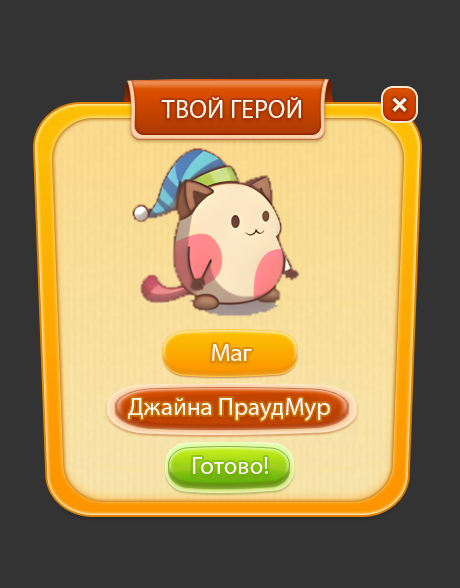
<style>
.page{position:relative;width:460px;height:588px;background:#333333}
.page>*{position:absolute;margin:0}
.t1{font:26px "MyriadPro-Regular";color:#ffffff}
.t2{font:25px "MyriadPro-Regular";color:#fdf6e8}
.t3{font:25px "MyriadPro-Regular";color:#ffffff}
</style>
<div class="page">
<p class="t1" style="left:161px;top:97px;width:140px;height:21px">ТВОЙ ГЕРОЙ</p>
<p class="t2" style="left:212px;top:344px;width:40px;height:17px">Маг</p>
<p class="t3" style="left:128px;top:398px;width:202px;height:23px">Джайна ПраудМур</p>
<p class="t2" style="left:193px;top:457px;width:75px;height:17px">Готово!</p>
</div>
